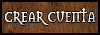
<style>
.page{position:relative;width:100px;height:35px}
.page>*{position:absolute;margin:0}
.t1{font:16.8px "Mason-Regular";scale:0.69 1}
</style>
<div class="page">
<p class="t1" style="left:5px;top:8px;width:91px;height:17px">CREAR CUENTA</p>
</div>
